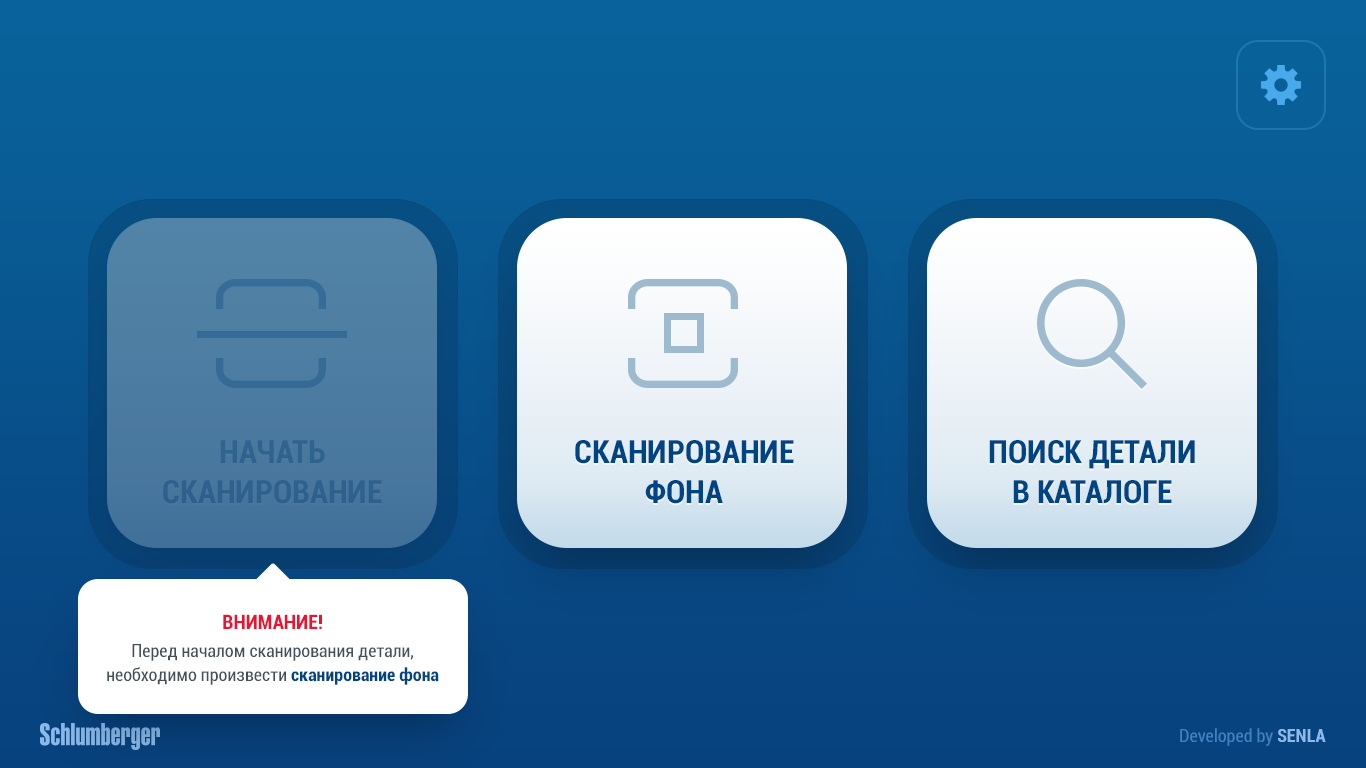
<style>
.page{position:relative;width:1366px;height:768px}
.page>*{position:absolute;margin:0}
.t1{font:32px/40px "Roboto-BoldCondensed";color:#2f618e;text-transform:uppercase}
.t2{font:32px/40px "Roboto-BoldCondensed";color:#004483;text-transform:uppercase}
.t3{font:18px/28px "Roboto-Condensed";color:#43505a}
.t4{font:20px/25.5px "Roboto-BoldCondensed";color:#f11030}
.t5{font:18px/24px "Roboto-Condensed";color:#43505a}
.t6{font:18px/24px "Roboto-BoldCondensed";color:#004483}
.t7{font:18px "Roboto-Condensed";color:#4282c2}
.t8{font:18px "Roboto-BoldCondensed";color:#8bbbeb}
</style>
<div class="page">
<p class="t1" style="left:163px;top:440px;width:219px;height:64px;text-align:center">начать<br>сканирование</p>
<p class="t2" style="left:575px;top:440px;width:219px;height:64px;text-align:center">сканирование<br>фона</p>
<p class="t2" style="left:989px;top:440px;width:206px;height:64px;text-align:center">поиск детали<br>в каталоге</p>
<p class="t3" style="left:107px;top:614px;width:332px;height:71px;text-align:center"><span class="t4">ВНИМАНИЕ!<br></span>Перед началом сканирования детали,<br><span class="t5">необходимо произвести </span><span class="t6">сканирование фона</span></p>
<p class="t7" style="left:1180px;top:728px;width:146px;height:18px">Developed by <span class="t8">SENLA</span></p>
</div>
